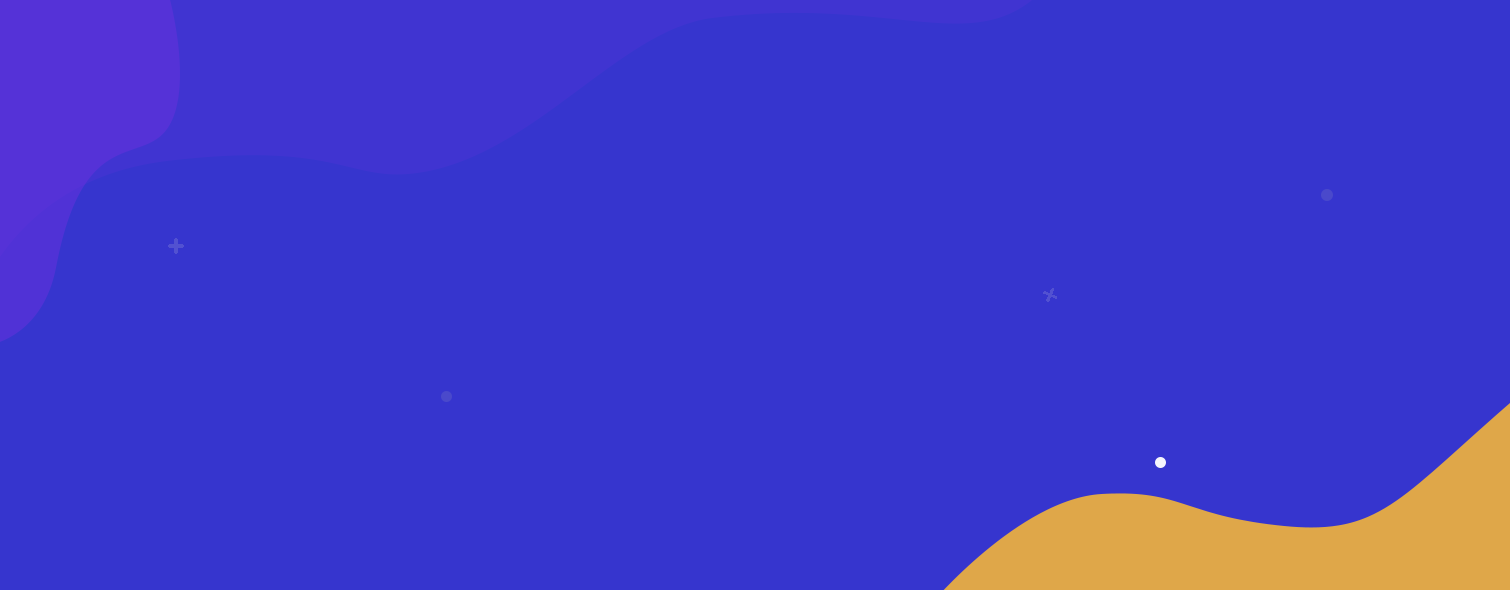
<style>
.page{position:relative;width:1510px;height:590px;background:#3635ce}
.page>*{position:absolute;margin:0}
.t1{font:30px "VarelaRound-Regular";letter-spacing:-0.06em;color:#5251d1;font-weight:bold}
</style>
<div class="page">
<p class="t1" style="left:168px;top:238px;width:16px;height:16px">+</p>
<p class="t1" style="left:1043px;top:288px;width:14px;height:14px;rotate:24deg">+</p>
</div>
